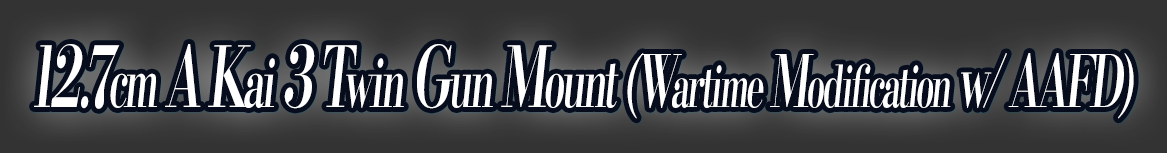
<style>
.page{position:relative;width:1167px;height:153px}
.page>*{position:absolute;margin:0}
.t1{font:57.6px "KochoStd-Heavy";letter-spacing:-0.08em;color:#ffffff;font-style:italic;scale:0.58 1}
.t2{font:84px "KochoStd-Heavy";letter-spacing:-0.08em;color:#ffffff;font-style:italic;scale:0.58 1}
.t3{font:67.2px "KochoStd-Heavy";letter-spacing:-0.08em;color:#ffffff;font-style:italic;scale:0.58 1}
.t4{font:72px "KochoStd-Heavy";letter-spacing:-0.08em;color:#ffffff;font-style:italic;scale:0.58 1}
</style>
<div class="page">
<p class="t1" style="left:34px;top:44px;width:1100px;height:75px"><span class="t2">12.7</span><span class="t3">cm </span><span class="t2">A K</span><span class="t3">ai </span><span class="t2">3 T</span><span class="t3">win </span><span class="t2">G</span><span class="t3">un </span><span class="t2">M</span><span class="t3">ount </span><span class="t4">(W</span>artime <span class="t4">M</span>odification <span class="t4">w/ AAFD)</span></p>
</div>
